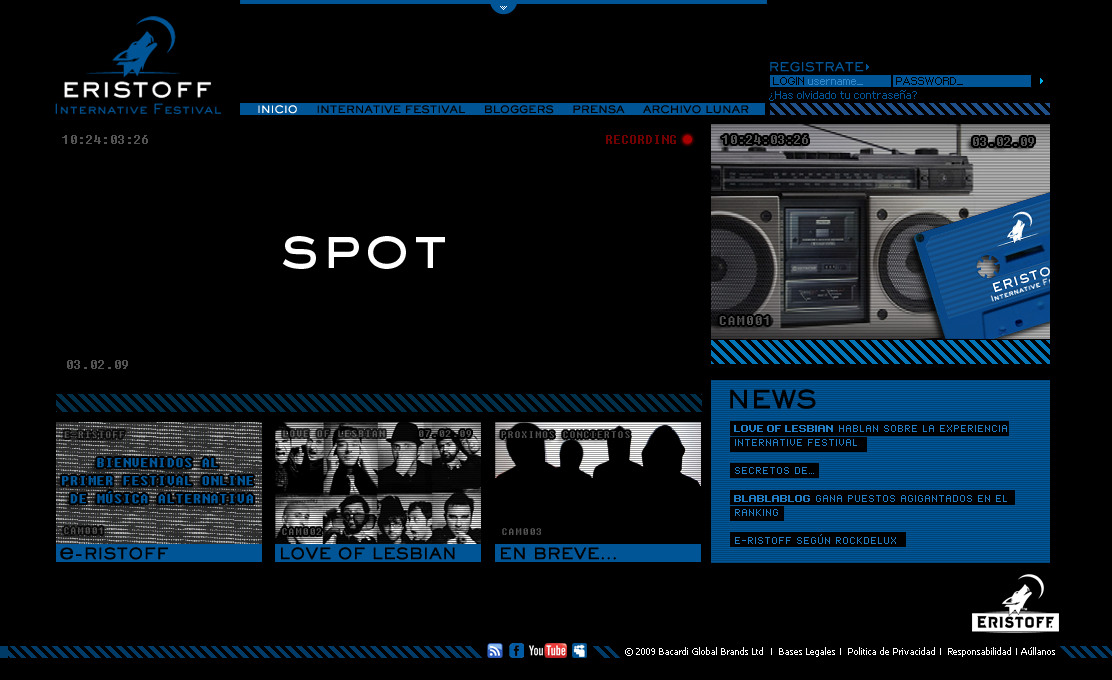
<style>
.page{position:relative;width:1112px;height:680px;background:#000000}
.page>*{position:absolute;margin:0}
.t1{font:12px "SackersGothicStd-Medium";color:#005596}
.t2{font:8px "px_sans_nouveaux";color:#3489ca}
.t3{font:8px "px_sans_nouveaux";color:#000000}
.t4{font:8px "px_sans_nouveaux";color:#005596}
.t5{font:10px "SackersGothicStd-Medium";color:#000000;text-transform:uppercase}
.t6{font:10px "SackersGothicStd-Medium";color:#ffffff;text-transform:uppercase}
.t7{font:8px "Fixedsys";color:#535353}
.t8{font:6px "Fixedsys";color:#720000;text-transform:uppercase}
.t9{font:60px "SackersGothicStd-Medium";color:#ffffff}
.t10{font:14px "Fixedsys";color:#535353}
.t11{font:24px "SackersGothicStd-Medium";color:#000000;text-transform:uppercase;font-weight:bold}
.t12{font:8px/14px "Standard0756";color:#000000}
.t13{font:8px/14px "Standard0763";color:#227ec5;text-transform:uppercase}
.t14{font:8px/14px "Standard0756";color:#227ec5;text-transform:uppercase}
.t15{font:8px/14px "Standard0756";color:#000000;font-weight:bold}
.t16{font:11px "Fixedsys";color:#4c4c4c;text-transform:uppercase}
.t17{font:11px "Fixedsys";color:#575757;text-transform:uppercase}
.t18{font:11px "Fixedsys";color:#535353}
.t19{font:11px "Fixedsys";color:#535353;text-transform:uppercase}
.t20{font:14px/18px "Fixedsys";color:#005596;text-transform:uppercase;font-weight:bold}
.t21{font:11px "Fixedsys";color:#4e4e4e}
.t22{font:15px "SackersGothicStd-Medium";color:#000000;text-transform:uppercase;font-weight:bold}
.t23{font:22px "AudiSansExt-Roman";color:#000000}
.t24{font:9px "Tahoma";color:#ffffff}
.t25{font:9px "ArialMT";color:#ffffff}
</style>
<div class="page">
<p class="t1" style="left:770px;top:62px;width:94px;height:10px">REGISTRATE</p>
<p class="t2" style="left:773px;top:77px;width:90px;height:8px"><span class="t3"> LOGIN </span>username_</p>
<p class="t3" style="left:896px;top:77px;width:67px;height:8px">PASSWORD_</p>
<p class="t4" style="left:769px;top:90px;width:148px;height:11px">¿Has olvidado tu contraseña?</p>
<p class="t5" style="left:258px;top:105px;width:491px;height:9px"><span class="t6">inicio</span>     Internative Festival     Bloggers     Prensa     Archivo lunar</p>
<p class="t7" style="left:62px;top:135px;width:86px;height:9px">10:24:03:26</p>
<p class="t8" style="left:606px;top:135px;width:70px;height:9px">recording</p>
<p class="t7" style="left:722px;top:135px;width:86px;height:9px">10:24:03:26</p>
<p class="t7" style="left:973px;top:137px;width:61px;height:9px">03.02.09</p>
<p class="t9" style="left:282px;top:236px;width:163px;height:33px">spot</p>
<p class="t10" style="left:719px;top:316px;width:50px;height:9px">CAM001</p>
<p class="t7" style="left:67px;top:360px;width:61px;height:9px">03.02.09</p>
<p class="t11" style="left:730px;top:389px;width:86px;height:20px">News</p>
<p class="t12" style="left:734px;top:425px;width:273px;height:119px;text-align:justify"><span class="t13">Love of Lesbian</span><span class="t14"> hablan sobre la experiencia <br>Internative Festival<br><br>Secretos de… <br><br></span><span class="t13">Blablablog</span><span class="t14"> gana puestos agigantados en el <br>ranking<br><br>E-ristoff según Rockdelux<br>. <br><br></span>Lorem Ipsum has been the industry's standard dummy text ever since the <span class="t15">1500s</span>, when an unknown printer took a galley of type and scrambled it to make a type specimen book. It has survived not only five centuries, but also the leap into electronic typesetting, remaining essentially unchanged.<br>It was popularised in the 1960s with the release of Letraset sheets containing <span class="t15">Lorem Ipsum passages.</span></p>
<p class="t16" style="left:64px;top:431px;width:61px;height:7px">e-ristoff</p>
<p class="t17" style="left:283px;top:430px;width:102px;height:7px">love of lesbian</p>
<p class="t18" style="left:419px;top:430px;width:52px;height:7px">07.02.09</p>
<p class="t19" style="left:501px;top:431px;width:129px;height:7px">proximos conciertos</p>
<p class="t20" style="left:62px;top:458px;width:191px;height:46px;text-align:center">Bienvenidos al <br>Primer Festival Online <br>de Música Alternativa</p>
<p class="t21" style="left:64px;top:527px;width:39px;height:7px">CAM001</p>
<p class="t18" style="left:282px;top:528px;width:39px;height:7px">CAM002</p>
<p class="t18" style="left:502px;top:528px;width:39px;height:7px">CAM003</p>
<p class="t22" style="left:60px;top:547px;width:108px;height:13px"><span class="t23">e</span>-ristoff</p>
<p class="t22" style="left:281px;top:547px;width:174px;height:13px">love of lesbian</p>
<p class="t22" style="left:501px;top:547px;width:115px;height:13px">en breve...</p>
<p class="t24" style="left:625px;top:647px;width:430px;height:10px">© 2009 Bacardi Global Brands Ltd  <span class="t25">I</span>  Bases Legales <span class="t25">I</span>  Politica de Privacidad <span class="t25">I</span>  Responsabilidad <span class="t25">I </span>Aúllanos</p>
</div>
